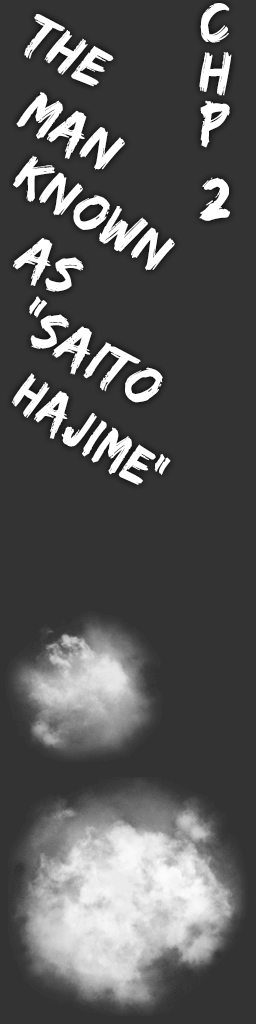
<style>
.page{position:relative;width:256px;height:1024px;background:#333333}
.page>*{position:absolute;margin:0}
.t1{font:60px/25.1px "EdoSZ";letter-spacing:0.03em;color:#ffffff}
.t2{font:57.6px "EdoSZ";letter-spacing:0.03em;color:#ffffff;scale:0.96 1}
.t3{font:57.1px "EdoSZ";letter-spacing:0.03em;color:#ffffff;scale:0.95 1}
.t4{font:55.9px "EdoSZ";letter-spacing:0.03em;color:#ffffff;scale:0.9 1}
</style>
<div class="page">
<p class="t1" style="left:199px;top:3px;width:33px;height:218px;text-align:center">C<br><br>H<br><br>P<br><br><br>2</p>
<p class="t2" style="left:24px;top:14px;width:90px;height:73px;rotate:30deg">The</p>
<p class="t2" style="left:16px;top:91px;width:109px;height:79px;rotate:30deg">Man</p>
<p class="t3" style="left:13px;top:155px;width:162px;height:116px;rotate:31deg">Known</p>
<p class="t2" style="left:13px;top:238px;width:71px;height:54px;rotate:30deg">as</p>
<p class="t2" style="left:29px;top:296px;width:134px;height:107px;rotate:30deg">“saito</p>
<p class="t4" style="left:11px;top:373px;width:160px;height:112px;rotate:33deg">Hajime”</p>
</div>
